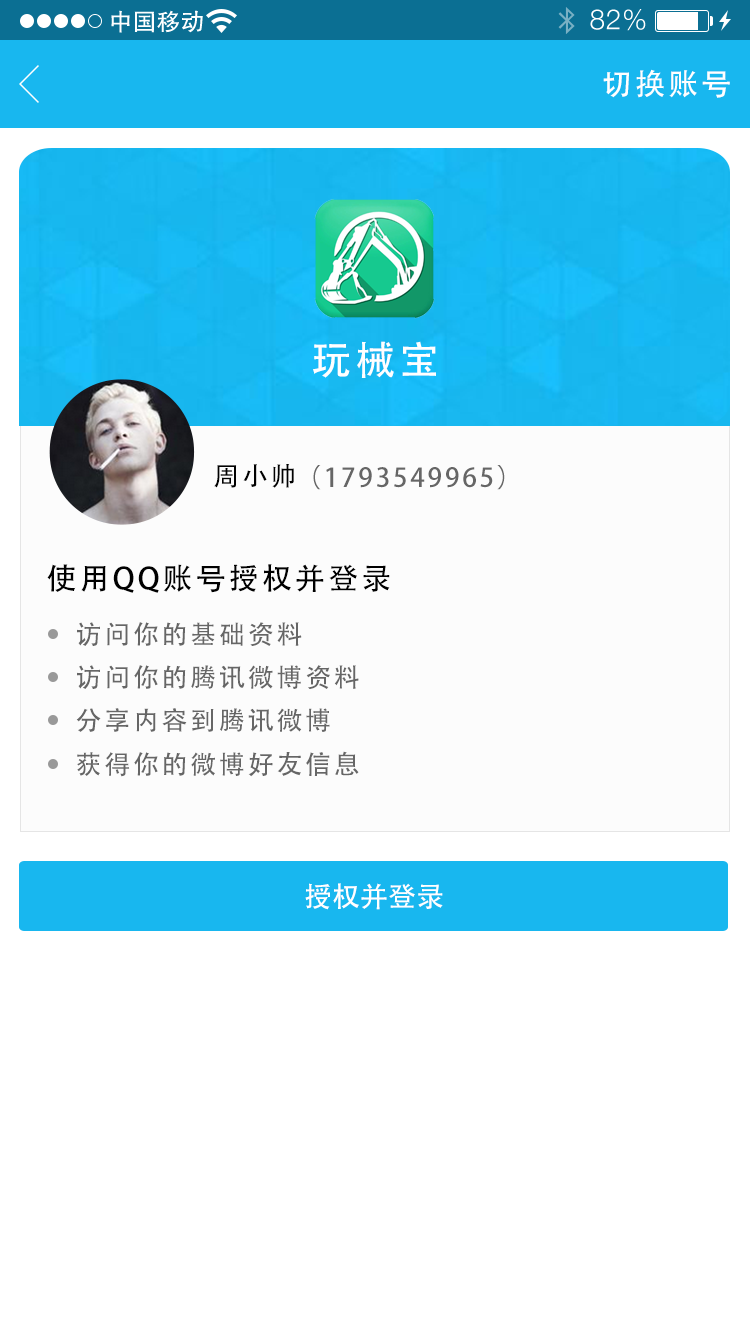
<style>
.page{position:relative;width:750px;height:1334px;background:#ffffff}
.page>*{position:absolute;margin:0}
.t1{font:30px "AdobeHeitiStd-Regular";letter-spacing:0.104em;color:#ffffff}
.t2{font:40px "AdobeHeitiStd-Regular";letter-spacing:0.104em;color:#ffffff}
.t3{font:26px "AdobeHeitiStd-Regular";letter-spacing:0.104em;color:#010101}
.t4{font:26px "AdobeHeitiStd-Regular";letter-spacing:0.104em;color:#666666}
.t5{font:30px "AdobeHeitiStd-Regular";letter-spacing:0.104em;color:#000000}
.t6{font:28px "AdobeHeitiStd-Regular";color:#ffffff}
</style>
<div class="page">
<p class="t1" style="left:603px;top:69px;width:127px;height:29px">切换账号</p>
<p class="t2" style="left:313px;top:341px;width:123px;height:37px">玩械宝</p>
<p class="t3" style="left:214px;top:464px;width:80px;height:24px">周小帅</p>
<p class="t4" style="left:313px;top:465px;width:192px;height:25px">（1793549965）</p>
<p class="t5" style="left:47px;top:564px;width:343px;height:29px">使用QQ账号授权并登录</p>
<p class="t4" style="left:77px;top:622px;width:225px;height:24px">访问你的基础资料</p>
<p class="t4" style="left:77px;top:665px;width:282px;height:24px">访问你的腾讯微博资料</p>
<p class="t4" style="left:76px;top:708px;width:254px;height:24px">分享内容到腾讯微博</p>
<p class="t4" style="left:77px;top:751px;width:282px;height:26px">获得你的微博好友信息</p>
<p class="t6" style="left:305px;top:883px;width:138px;height:27px">授权并登录</p>
</div>
